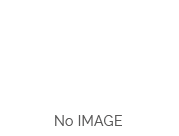
<style>
.page{position:relative;width:179px;height:136px;background:#ffffff}
.page>*{position:absolute;margin:0}
.t1{font:14px "Raleway-Regular";letter-spacing:0.025em;color:#5a5959}
</style>
<div class="page">
<p class="t1" style="left:55px;top:115px;width:67px;height:11px">No IMAGE</p>
</div>
